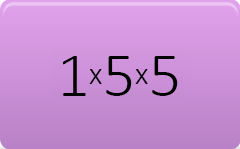
<style>
.page{position:relative;width:240px;height:149px}
.page>*{position:absolute;margin:0}
.t1{font:64px "Calibri-Light";color:#000000}
.t2{font:32px "Calibri-Light";color:#000000}
</style>
<div class="page">
<p class="t1" style="left:62px;top:56px;width:116px;height:40px">1<span class="t2">x</span>5<span class="t2">x</span>5</p>
</div>
